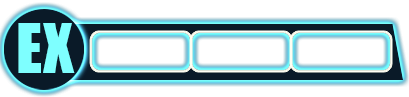
<style>
.page{position:relative;width:409px;height:97px;background:#ffffff}
.page>*{position:absolute;margin:0}
.t1{font:62.7px "Impact";color:#7effff}
</style>
<div class="page">
<p class="t1" style="left:18px;top:23px;width:57px;height:50px">EX</p>
</div>
